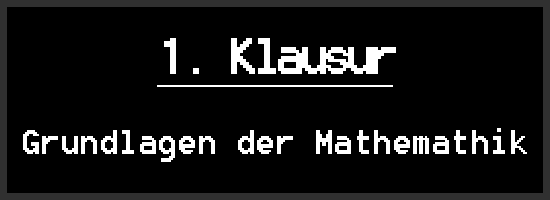
<style>
.page{position:relative;width:550px;height:200px;background:#000000}
.page>*{position:absolute;margin:0}
.t1{font:50px "8514oem";color:#ffffff;text-decoration:underline}
.t2{font:41.7px "8514oem";color:#ffffff}
</style>
<div class="page">
<p class="t1" style="left:157px;top:38px;width:239px;height:49px">1. Klausur</p>
<p class="t2" style="left:23px;top:128px;width:504px;height:34px">Grundlagen der Mathemathik</p>
</div>
